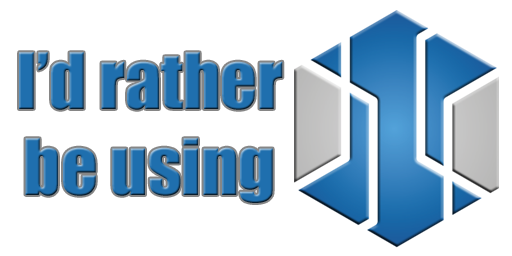
<style>
.page{position:relative;width:512px;height:256px;background:#ffffff}
.page>*{position:absolute;margin:0}
.t1{font:71.7px "Impact";color:#1f6fae}
</style>
<div class="page">
<p class="t1" style="left:19px;top:52px;width:264px;height:151px;text-align:center">I’d rather<br>be using</p>
</div>
